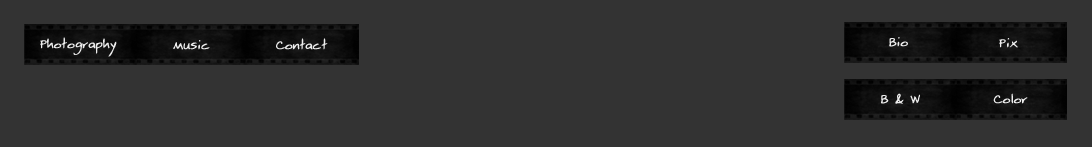
<style>
.page{position:relative;width:1092px;height:147px;background:#333333}
.page>*{position:absolute;margin:0}
.t1{font:13.8px "Beatty";color:#eeeeee;font-weight:bold}
</style>
<div class="page">
<p class="t1" style="left:40px;top:37px;width:77px;height:20px">Photography</p>
<p class="t1" style="left:173px;top:40px;width:37px;height:10px">Music</p>
<p class="t1" style="left:276px;top:38px;width:52px;height:12px">Contact</p>
<p class="t1" style="left:889px;top:37px;width:19px;height:10px">Bio</p>
<p class="t1" style="left:999px;top:38px;width:19px;height:10px">Pix</p>
<p class="t1" style="left:881px;top:93px;width:39px;height:11px">B &amp; W</p>
<p class="t1" style="left:993px;top:93px;width:35px;height:11px">Color</p>
</div>
